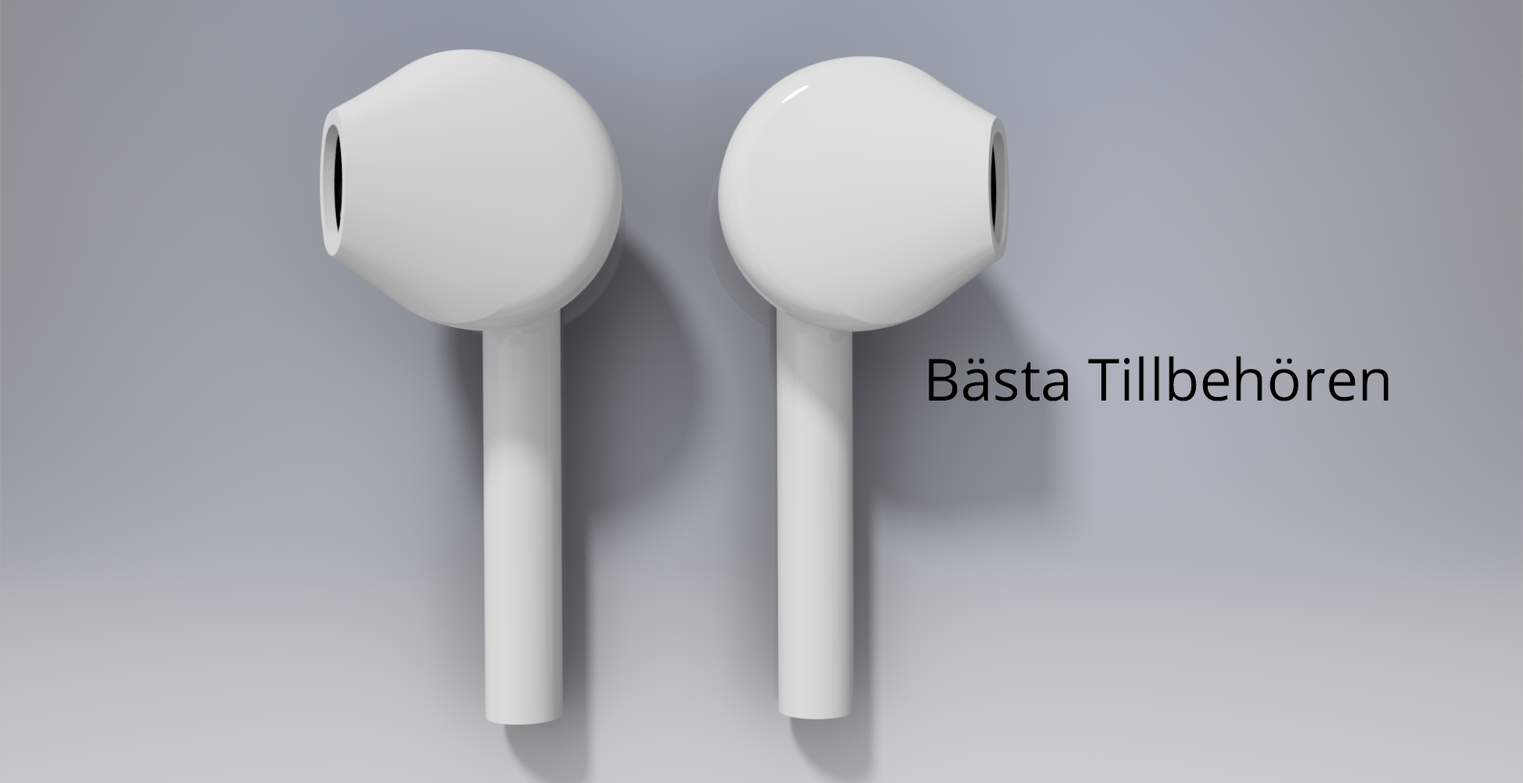
<style>
.page{position:relative;width:1523px;height:783px}
.page>*{position:absolute;margin:0}
.t1{font:58.1px "OpenSans";color:#000000}
</style>
<div class="page">
<p class="t1" style="left:928px;top:356px;width:460px;height:46px">Bästa Tillbehören</p>
</div>
